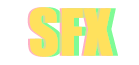
<style>
.page{position:relative;width:139px;height:65px;background:#ffffff}
.page>*{position:absolute;margin:0}
.t1{font:60px "Impact";color:#ffe15d}
.t2{font:60px "Impact"}
</style>
<div class="page">
<p class="t1" style="left:27px;top:7px;width:84px;height:50px">SFX</p>
<p class="t1" style="left:29px;top:7px;width:84px;height:50px">SFX</p>
<p class="t2" style="left:34px;top:7px;width:84px;height:50px">SFX</p>
</div>
